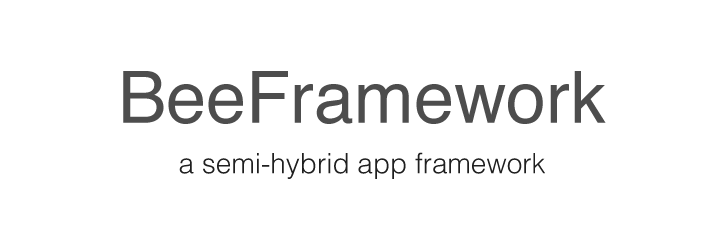
<style>
.page{position:relative;width:724px;height:244px;background:#ffffff}
.page>*{position:absolute;margin:0}
.t1{font:72px "Helvetica";color:#4d4d4d}
.t2{font:28px "Helvetica-Light";color:#1f1f1f}
</style>
<div class="page">
<p class="t1" style="left:123px;top:71px;width:483px;height:53px">BeeFramework</p>
<p class="t2" style="left:179px;top:152px;width:366px;height:27px">a semi-hybrid app framework</p>
</div>
